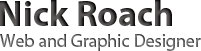
<style>
.page{position:relative;width:201px;height:51px;background:#ffffff}
.page>*{position:absolute;margin:0}
.t1{font:36px "MyriadPro-Bold"}
.t2{font:18px "MyriadPro-Regular"}
</style>
<div class="page">
<p class="t1" style="left:0px;top:0px;width:172px;height:26px">Nick Roach</p>
<p class="t2" style="left:0px;top:34px;width:201px;height:17px">Web and Graphic Designer</p>
</div>
